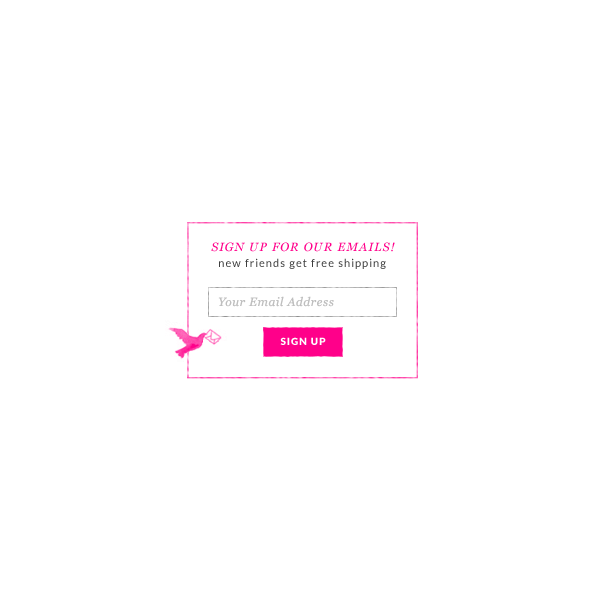
<style>
.page{position:relative;width:600px;height:600px;background:#ffffff}
.page>*{position:absolute;margin:0}
.t1{font:12px "Georgia-Italic";letter-spacing:0.1em;color:#ff008a}
.t2{font:11px "Lato-Regular";letter-spacing:0.1em;color:#3e3e3e}
.t3{font:12px "Georgia-Italic";letter-spacing:0.05em;color:#bfbfbf}
.t4{font:10px "Lato-Black";letter-spacing:0.1em;color:#ffffff}
</style>
<div class="page">
<p class="t1" style="left:211px;top:242px;width:184px;height:10px">SIGN UP FOR OUR EMAILS!</p>
<p class="t2" style="left:219px;top:258px;width:167px;height:11px">new friends get free shipping</p>
<p class="t3" style="left:218px;top:296px;width:116px;height:11px">Your Email Address</p>
<p class="t4" style="left:280px;top:337px;width:46px;height:8px">SIGN UP</p>
</div>
